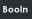
<style>
.page{position:relative;width:32px;height:19px;background:#2c3033}
.page>*{position:absolute;margin:0}
.t1{font:9px "CenturyGothic-Bold";letter-spacing:0.03em;color:#ffffff}
</style>
<div class="page">
<p class="t1" style="left:3px;top:5px;width:25px;height:8px">Booln</p>
</div>
